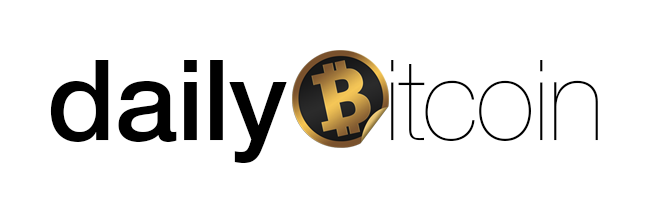
<style>
.page{position:relative;width:654px;height:213px;background:#ffffff}
.page>*{position:absolute;margin:0}
.t1{font:112px "HelveticaNeue-UltraLight";letter-spacing:0.01em;color:#000000}
.t2{font:112px "HelveticaNeue-Medium";letter-spacing:0.01em;color:#000000}
</style>
<div class="page">
<p class="t1" style="left:50px;top:60px;width:548px;height:103px"><span class="t2">daily   </span>itcoin</p>
</div>
